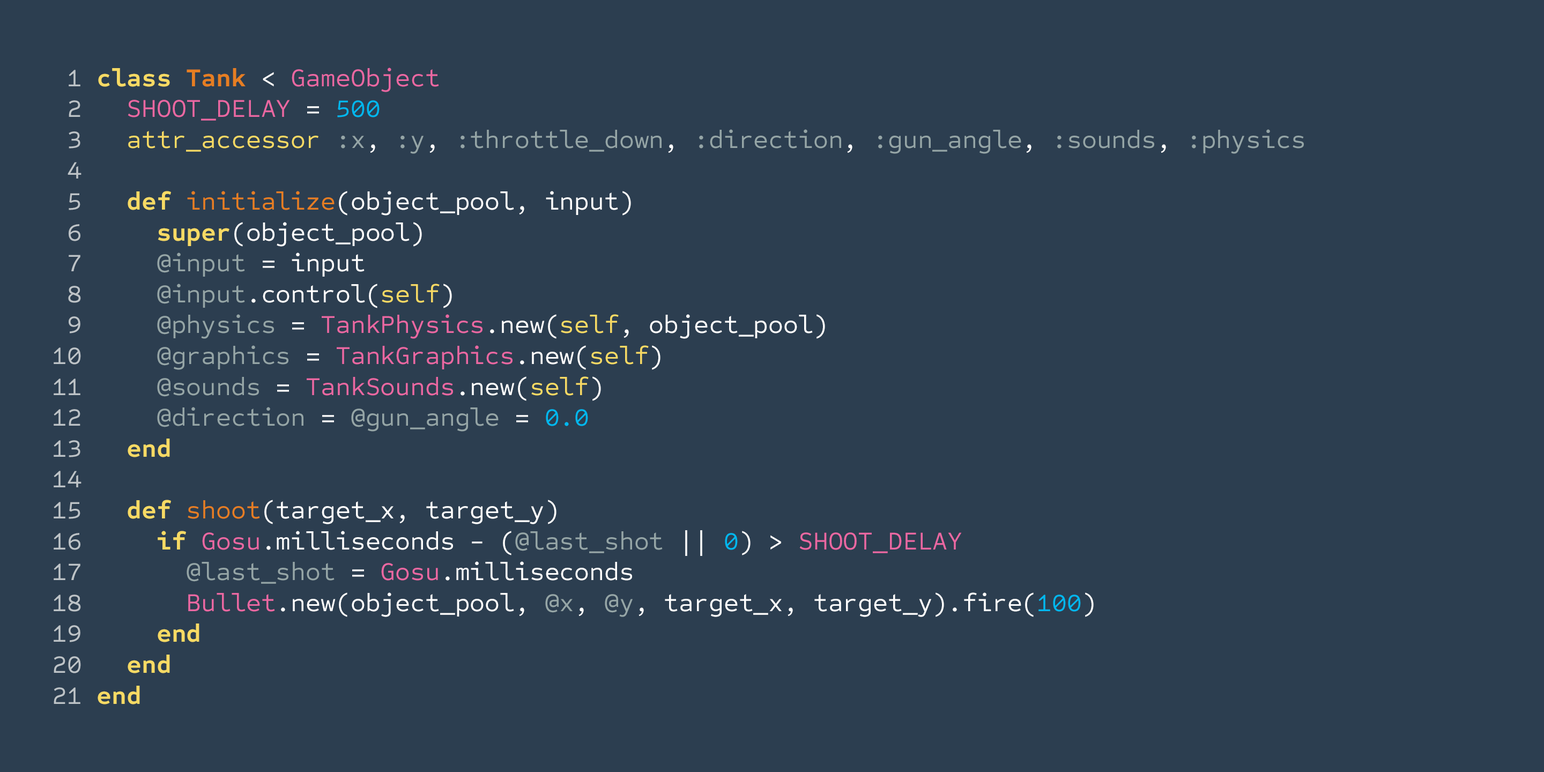
<style>
.page{position:relative;width:1544px;height:772px;background:#2c3e50}
.page>*{position:absolute;margin:0}
.t1{font:25.7px "SometypeMono-Regular";color:#ffffff}
.t2{font:25.7px "SometypeMono-Regular";color:#7f8c8d}
.t3{font:25.7px "SometypeMono-Regular";color:#bdc3c7}
.t4{font:25.7px "SometypeMono-Bold";color:#f7da64}
.t5{font:25.7px "SometypeMono-Bold";color:#e67e22}
.t6{font:25.7px "SometypeMono-Regular";color:#ea68a2}
.t7{font:25.7px "SometypeMono-Regular";color:#00b7ee}
.t8{font:25.7px "SometypeMono-Regular";color:#f7da64}
.t9{font:25.7px "SometypeMono-Regular";color:#95a5a6}
.t10{font:25.7px "SometypeMono-Regular";color:#e67e22}
</style>
<div class="page">
<p class="t1" style="left:54px;top:68px;width:1250px;height:637px"><span class="t2"> </span><span class="t3">1 </span><span class="t4">class </span><span class="t5">Tank </span>&lt; <span class="t6">GameObject<br> </span><span class="t3">2   </span><span class="t6">SHOOT_DELAY </span>= <span class="t7">500<br> </span><span class="t3">3   </span><span class="t8">attr_accessor </span><span class="t9">:x</span>,<span class="t9"> :y</span>,<span class="t9"> :throttle_down</span>,<span class="t9"> :direction</span>,<span class="t9"> :gun_angle</span>,<span class="t9"> :sounds</span>,<span class="t9"> :physics<br> </span><span class="t3">4 <br> 5   </span><span class="t4">def </span><span class="t10">initialize</span>(object_pool, input)<br> <span class="t3">6     </span><span class="t4">super</span>(object_pool)<br> <span class="t3">7     </span><span class="t9">@input</span> = input<br> <span class="t3">8     </span><span class="t9">@input</span>.control(<span class="t8">self</span>)<br> <span class="t3">9     </span><span class="t9">@physics </span>= <span class="t6">TankPhysics</span>.new(<span class="t8">self</span>, object_pool)<br><span class="t3">10     </span><span class="t9">@graphics </span>= <span class="t6">TankGraphics</span>.new(<span class="t8">self</span>)<br><span class="t3">11     </span><span class="t9">@sounds </span>= <span class="t6">TankSounds</span>.new(<span class="t8">self</span>)<br><span class="t3">12     </span><span class="t9">@direction </span>= <span class="t9">@gun_angle </span>= <span class="t7">0.0<br></span><span class="t3">13   </span><span class="t4">end<br></span><span class="t3">14 <br>15   </span><span class="t4">def </span><span class="t10">shoot</span>(target_x, target_y)<br><span class="t3">16     </span><span class="t4">if </span><span class="t6">Gosu</span>.milliseconds - (<span class="t9">@last_shot </span>|| <span class="t7">0</span>) &gt; <span class="t6">SHOOT_DELAY<br></span><span class="t3">17       </span><span class="t9">@last_shot </span>= <span class="t6">Gosu</span>.milliseconds<br><span class="t3">18       </span><span class="t6">Bullet</span>.new(object_pool, <span class="t9">@x</span>, <span class="t9">@y</span>, target_x, target_y).fire(<span class="t7">100</span>)<br><span class="t3">19     </span><span class="t4">end<br></span><span class="t3">20   </span><span class="t4">end<br></span><span class="t3">21 </span><span class="t4">end</span></p>
</div>
